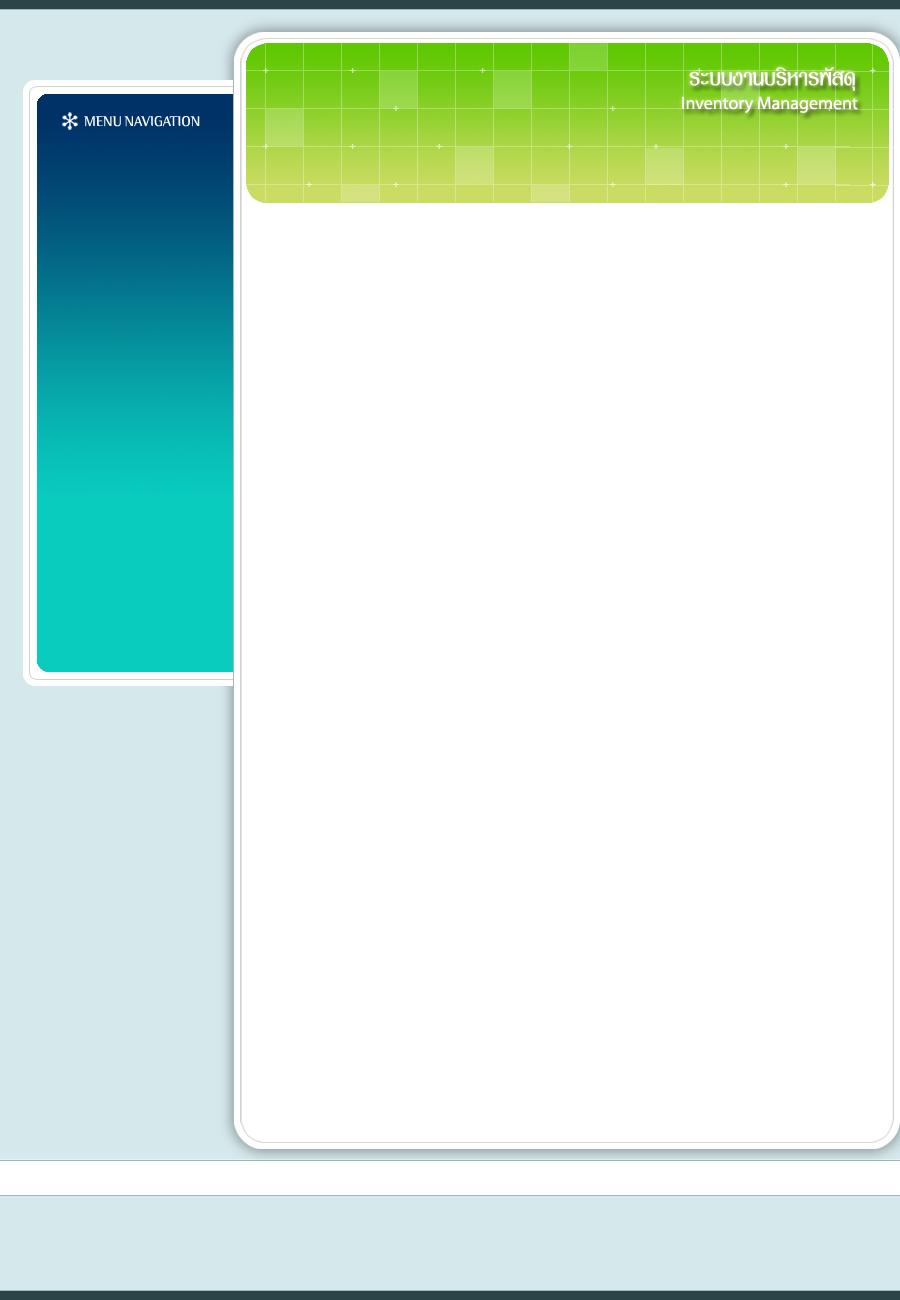
<style>
.page{position:relative;width:900px;height:1300px;background:#ffffff}
.page>*{position:absolute;margin:0}
.t1{font:33px "PSLAsadong";color:#ffffff}
.t2{font:18px "MyriadPro-Regular";color:#ffffff}
.t3{font:14px "BinaryITCTTLight";color:#ffffff}
</style>
<div class="page">
<p class="t1" style="left:689px;top:67px;width:166px;height:24px">ระบบงานบริหารพัสดุ</p>
<p class="t2" style="left:682px;top:96px;width:176px;height:17px">Inventory Management</p>
<p class="t3" style="left:84px;top:116px;width:116px;height:11px">MENU NAVIGATION</p>
</div>
